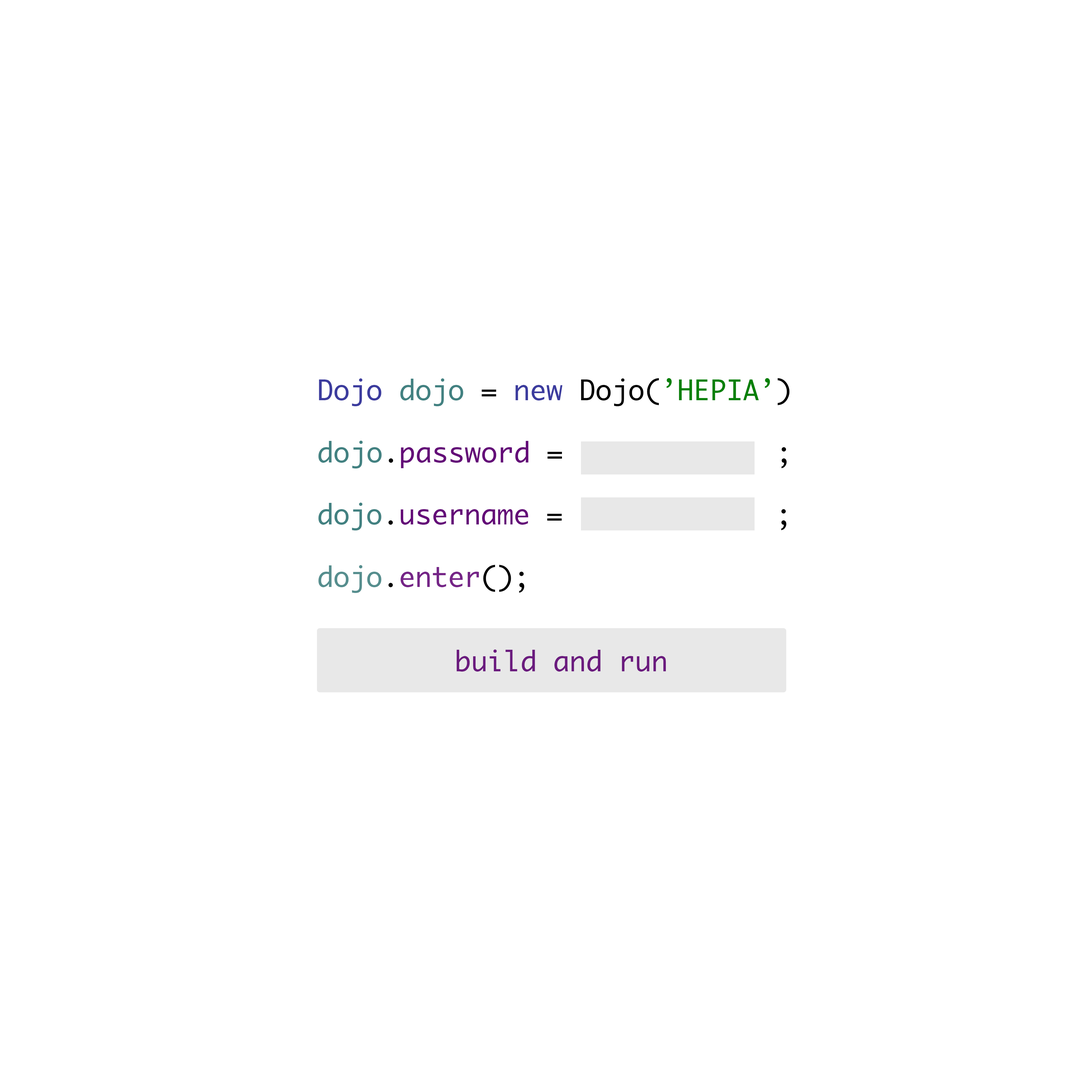
<style>
.page{position:relative;width:1092px;height:1092px;background:#ffffff}
.page>*{position:absolute;margin:0}
.t1{font:27.3px "Monaco";color:#068006}
.t2{font:27.3px "Monaco";color:#3c3c9e}
.t3{font:27.3px "Monaco";color:#428181}
.t4{font:27.3px "Monaco";color:#000000}
.t5{font:27.3px "Monaco";color:#640b78}
.t6{font:27.3px "Monaco";color:#752587}
.t7{font:27.3px "Monaco";color:#568e8e}
.t8{font:27.3px "Monaco";color:#6b1b7e}
</style>
<div class="page">
<p class="t1" style="left:319px;top:378px;width:471px;height:28px"><span class="t2">Dojo </span><span class="t3">dojo</span><span class="t4"> = </span><span class="t2">new </span><span class="t4">Dojo(</span>’HEPIA’<span class="t4">)</span></p>
<p class="t4" style="left:318px;top:441px;width:469px;height:27px"><span class="t3">dojo</span>.<span class="t5">password </span>=             ;</p>
<p class="t4" style="left:318px;top:503px;width:469px;height:27px"><span class="t3">dojo</span>.<span class="t5">username </span>=             ;</p>
<p class="t6" style="left:318px;top:565px;width:206px;height:28px"><span class="t7">dojo</span><span class="t4">.</span>enter<span class="t4">();</span></p>
<p class="t8" style="left:456px;top:649px;width:210px;height:23px">build and run</p>
</div>
